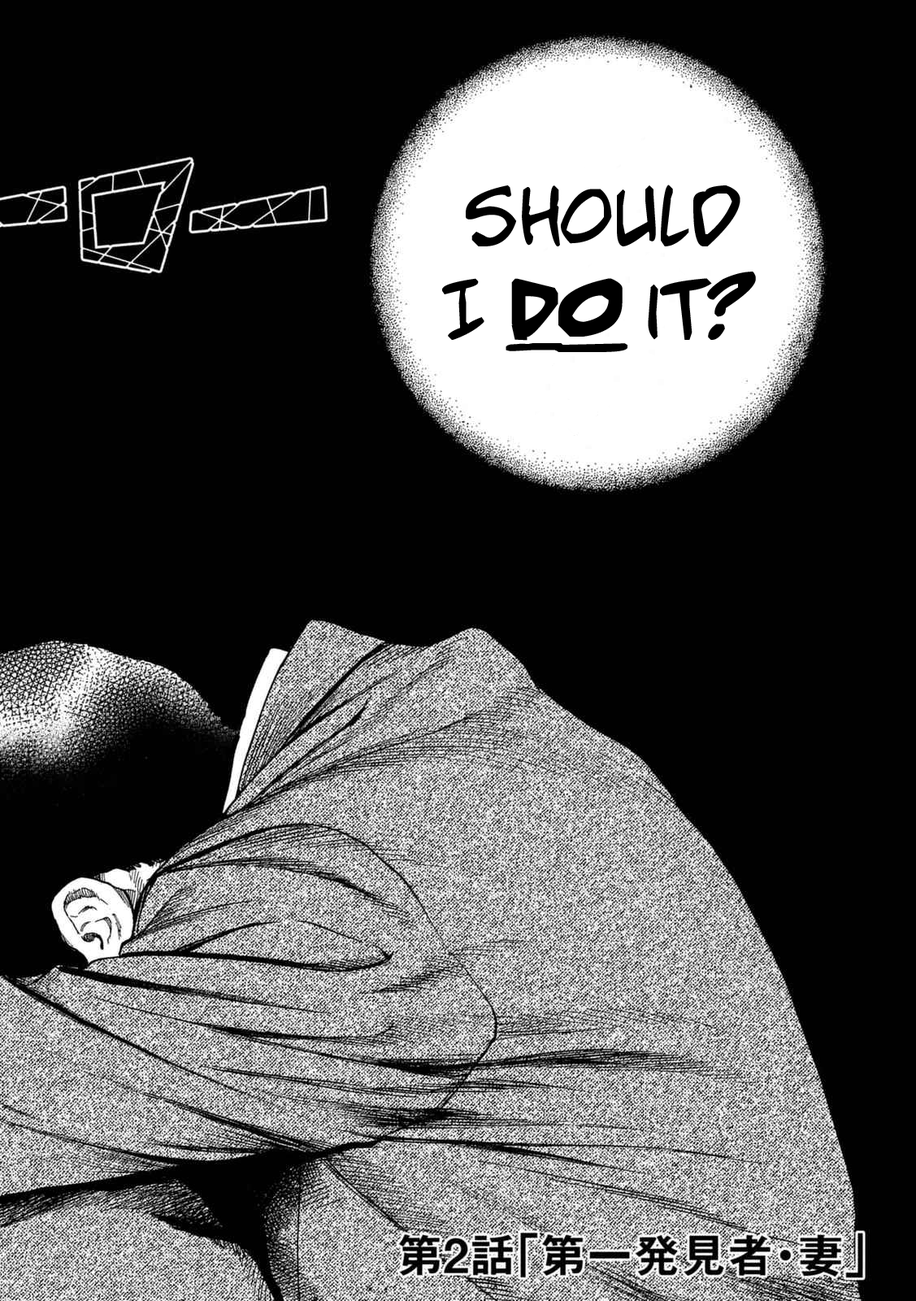
<style>
.page{position:relative;width:916px;height:1301px;background:#010101}
.page>*{position:absolute;margin:0}
.t1{font:78.1px "AdamWarrenpro";color:#000000}
.t2{font:78.1px "AdamWarrenpro-BoldItalic";color:#000000;font-weight:bold}
</style>
<div class="page">
<p class="t1" style="left:442px;top:185px;width:314px;height:167px;text-align:center">Should <br>I <span class="t2">do </span>it?</p>
</div>
